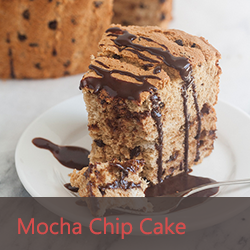
<style>
.page{position:relative;width:250px;height:250px}
.page>*{position:absolute;margin:0}
.t1{font:22px "MicrosoftTaiLe";color:#d64d4c}
</style>
<div class="page">
<p class="t1" style="left:18px;top:217px;width:168px;height:22px">Mocha Chip Cake</p>
</div>
